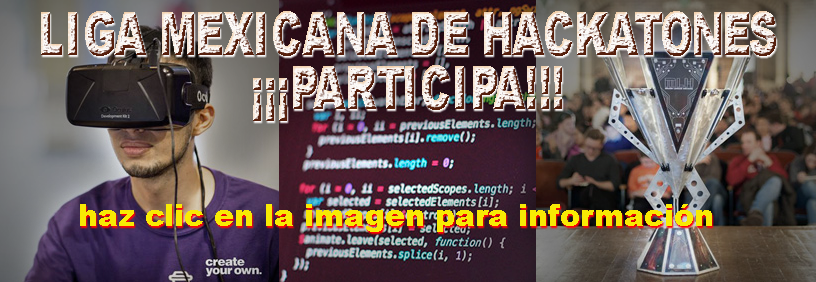
<style>
.page{position:relative;width:816px;height:282px}
.page>*{position:absolute;margin:0}
.t1{font:60px/54px "Arial-Black";scale:0.69 1}
.t2{font:30px "Arial-Black";color:#f8ea04}
</style>
<div class="page">
<p class="t1" style="left:41px;top:11px;width:735px;height:110px;text-align:center">LIGA MEXICANA DE HACKATONES<br>¡¡¡PARTICIPA!!!</p>
<p class="t2" style="left:80px;top:204px;width:632px;height:28px">haz clic en la imagen para información</p>
</div>
